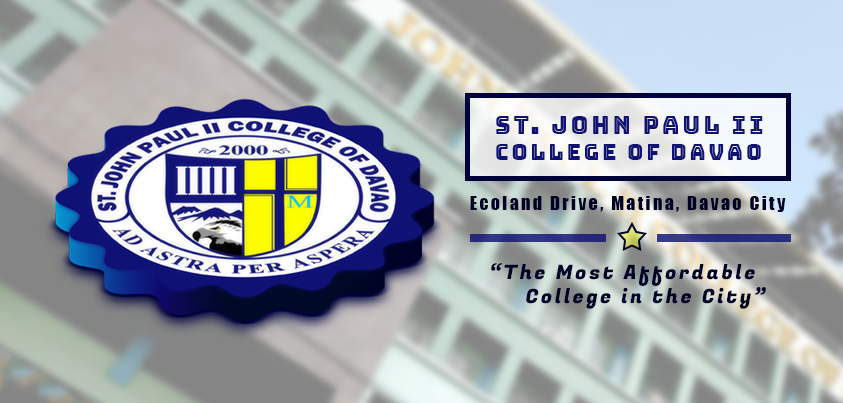
<style>
.page{position:relative;width:843px;height:403px}
.page>*{position:absolute;margin:0}
.t1{font:23.7px "BungeeInline-Regular";letter-spacing:0.14em;color:#0f1175}
.t2{font:21.7px "BungeeInline-Regular";letter-spacing:0.14em;color:#0f1175}
.t3{font:17.7px "Impact";letter-spacing:0.14em;color:#000126}
.t4{font:19.7px "FugazOne-Regular";letter-spacing:0.14em;color:#000126}
</style>
<div class="page">
<p class="t1" style="left:496px;top:116px;width:267px;height:44px">St. John Paul II <br><span class="t2">College of Davao</span></p>
<p class="t3" style="left:470px;top:196px;width:316px;height:16px">Ecoland Drive, Matina, Davao City</p>
<p class="t4" style="left:491px;top:263px;width:275px;height:46px">“The Most Affordable<br> College in the City”</p>
</div>
